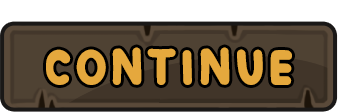
<style>
.page{position:relative;width:338px;height:112px}
.page>*{position:absolute;margin:0}
.t1{font:51.5px "PositiveForwardRegular";letter-spacing:0.1em;color:#e5a83d}
</style>
<div class="page">
<p class="t1" style="left:46px;top:47px;width:246px;height:38px">CONTINUE</p>
</div>
